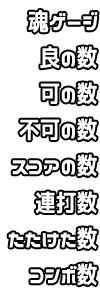
<style>
.page{position:relative;width:100px;height:288px;background:#ffffff}
.page>*{position:absolute;margin:0}
.t1{font:24.2px "NicoKaku";color:#ffffff;scale:0.86 1}
</style>
<div class="page">
<p class="t1" style="left:28px;top:10px;width:70px;height:23px">魂ゲージ</p>
<p class="t1" style="left:40px;top:46px;width:57px;height:23px">良の数</p>
<p class="t1" style="left:40px;top:82px;width:57px;height:23px">可の数</p>
<p class="t1" style="left:19px;top:118px;width:78px;height:23px">不可の数</p>
<p class="t1" style="left:12px;top:154px;width:85px;height:23px">スコアの数</p>
<p class="t1" style="left:35px;top:191px;width:62px;height:23px">連打数</p>
<p class="t1" style="left:8px;top:227px;width:89px;height:23px">たたけた数</p>
<p class="t1" style="left:30px;top:263px;width:67px;height:23px">コンボ数</p>
</div>
